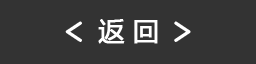
<style>
.page{position:relative;width:256px;height:64px;background:#333333}
.page>*{position:absolute;margin:0}
.t1{font:26px "MicrosoftYaHei";letter-spacing:0.3em;color:#ffffff;font-weight:bold}
</style>
<div class="page">
<p class="t1" style="left:98px;top:19px;width:60px;height:25px">返回</p>
</div>
